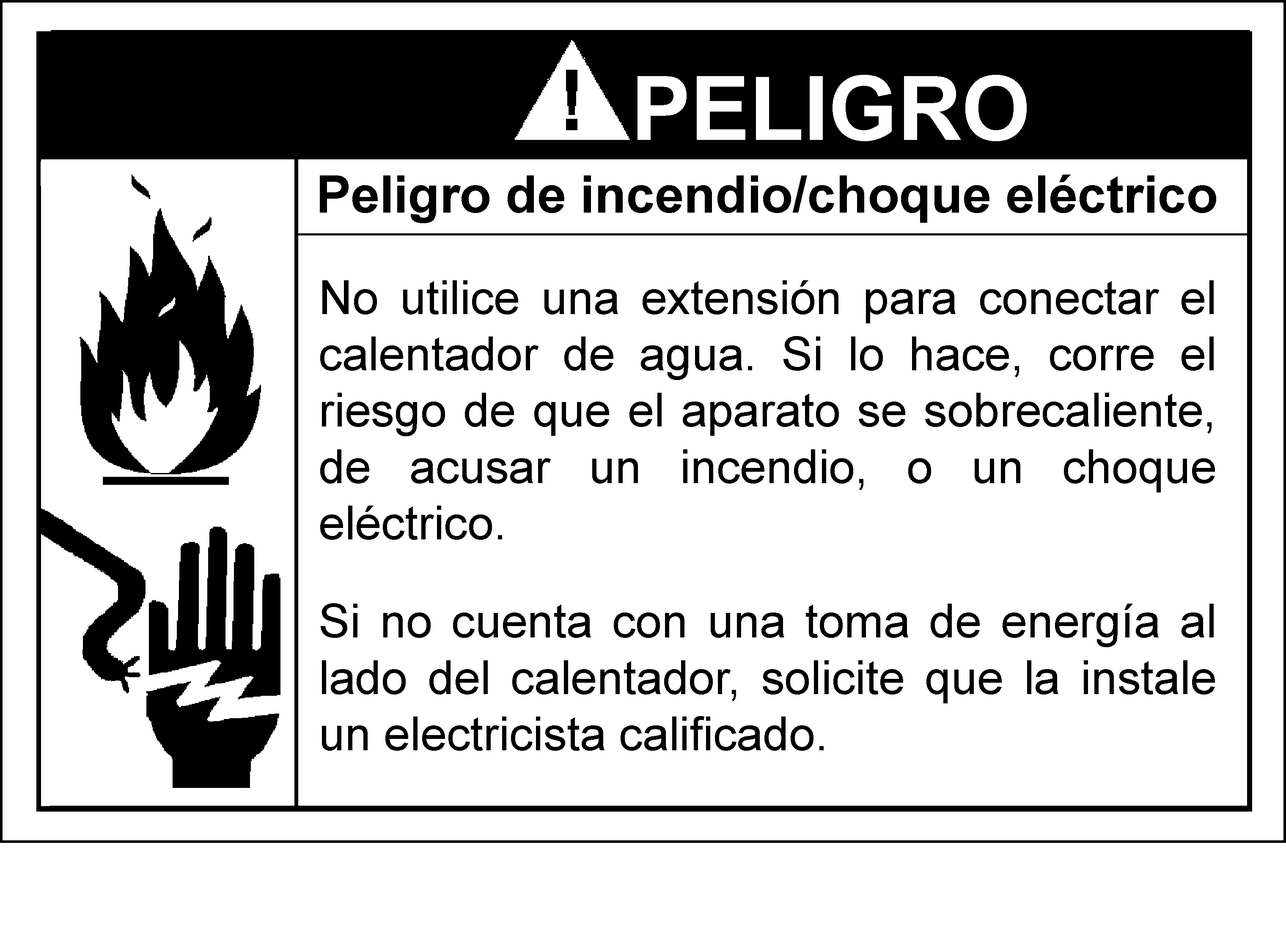
<style>
.page{position:relative;width:1286px;height:927px;background:#ffffff}
.page>*{position:absolute;margin:0}
.t1{font:52.2px "Arial-BoldMT";letter-spacing:-0.005em;color:#010101}
.t2{font:47px "ArialMT";color:#000000}
</style>
<div class="page">
<p class="t1" style="left:320px;top:175px;width:896px;height:48px">Peligro de incendio/choque eléctrico</p>
<p class="t2" style="left:320px;top:280px;width:895px;height:471px;text-align:justify">No utilice una extensión para conectar el calentador de agua. Si lo hace, corre el riesgo de que el aparato se sobrecaliente, de acusar un incendio, o un choque eléctrico.<br>Si no cuenta con una toma de energía al lado del calentador, solicite que la instale un electricista calificado.</p>
</div>
